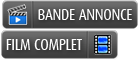
<style>
.page{position:relative;width:140px;height:60px}
.page>*{position:absolute;margin:0}
.t1{font:16px "DaxCondensed";letter-spacing:-0.025em;color:#ffffff}
</style>
<div class="page">
<p class="t1" style="left:38px;top:9px;width:94px;height:11px">BANDE ANNONCE</p>
<p class="t1" style="left:6px;top:39px;width:76px;height:11px">FILM COMPLET</p>
</div>
